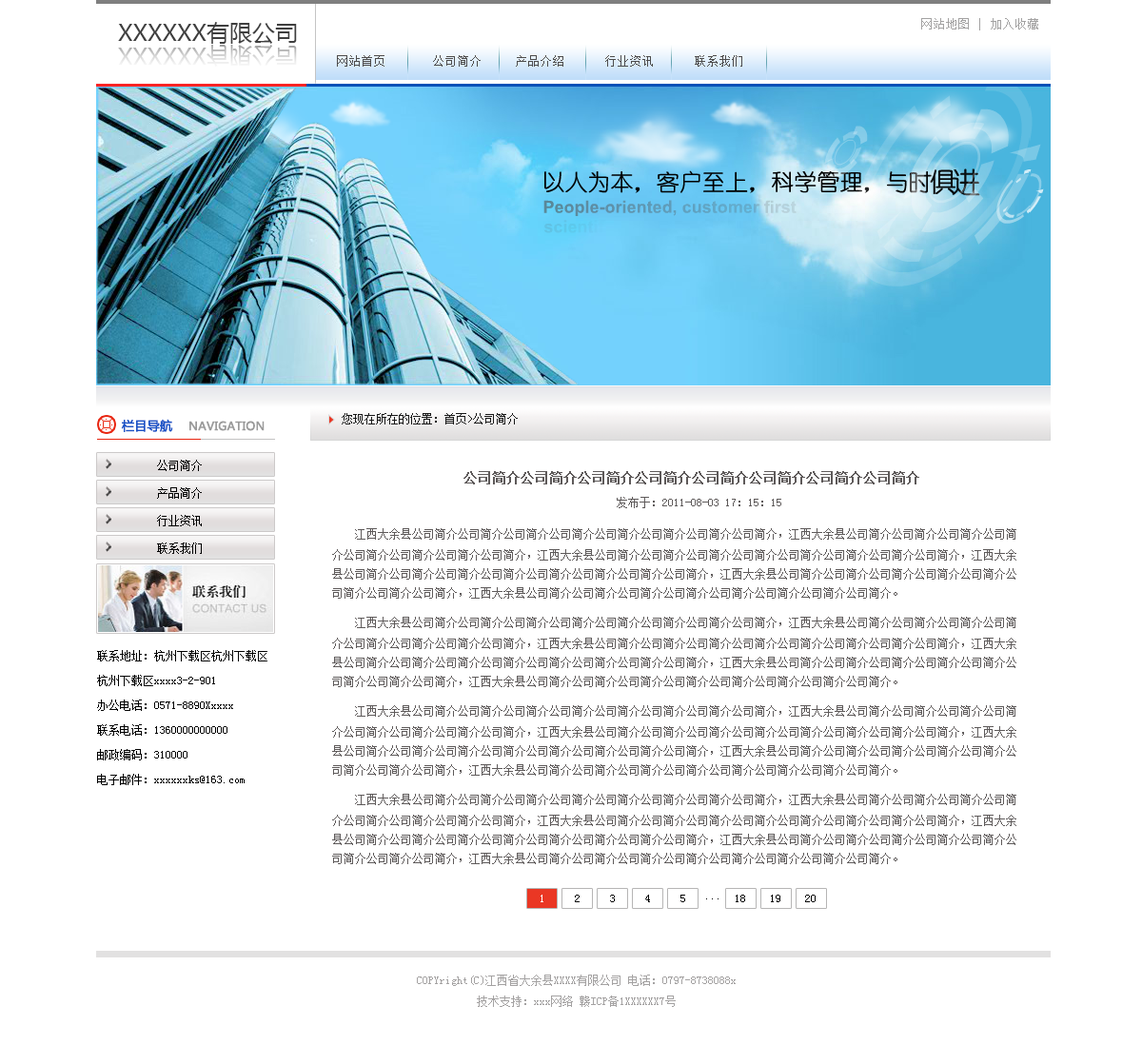
<style>
.page{position:relative;width:1142px;height:1045px;background:#ffffff}
.page>*{position:absolute;margin:0}
.t1{font:22.8px "MicrosoftYaHei";color:#3f3f3f}
.t2{font:12.4px "SimSun";color:#a3a2a2}
.t3{font:22.8px "MicrosoftYaHei"}
.t4{font:12.4px "SimSun";color:#4d4c4c}
.t5{font:11.4px "SimSun";color:#191919}
.t6{font:11.4px "MicrosoftYaHei";color:#9a9a9a;font-weight:bold}
.t7{font:12.4px "MicrosoftYaHei";color:#1952c6;font-weight:bold}
.t8{font:11.4px "SimSun";color:#000000}
.t9{font:13.3px "SimSun";color:#5e5a5a;font-weight:bold}
.t10{font:11.4px "SimSun";color:#5e5a5a}
.t11{font:11.4px/19px "SimSun";color:#5e5a5a}
.t12{font:11.4px/20.9px "SimSun";color:#5e5a5a}
.t13{font:11.4px/24.7px "SimSun";color:#000000}
.t14{font:11.4px "SimSun";color:#ffffff}
.t15{font:11.4px/20.9px "SimSun";color:#a4a2a2}
</style>
<div class="page">
<p class="t1" style="left:118px;top:22px;width:179px;height:22px">XXXXXX有限公司</p>
<p class="t2" style="left:921px;top:18px;width:117px;height:12px">网站地图 | 加入收藏</p>
<p class="t3" style="left:118px;top:45px;width:179px;height:22px">XXXXXX有限公司</p>
<p class="t4" style="left:337px;top:55px;width:405px;height:12px">网站首页       公司简介     产品介绍      行业资讯      联系我们</p>
<p class="t5" style="left:342px;top:413px;width:176px;height:11px">您现在所在的位置：首页&gt;公司简介</p>
<p class="t6" style="left:121px;top:419px;width:143px;height:13px"><span class="t7">栏目导航    </span>NAVIGATION</p>
<p class="t8" style="left:157px;top:459px;width:45px;height:12px">公司简介</p>
<p class="t9" style="left:463px;top:471px;width:456px;height:13px">公司简介公司简介公司简介公司简介公司简介公司简介公司简介公司简介</p>
<p class="t8" style="left:157px;top:487px;width:45px;height:11px">产品简介</p>
<p class="t10" style="left:616px;top:497px;width:165px;height:11px">发布于：2011-08-03 17：15：15</p>
<p class="t8" style="left:157px;top:515px;width:45px;height:11px">行业资讯</p>
<p class="t11" style="left:332px;top:528px;width:684px;height:70px"><span class="t12">　　</span>江西大余县公司简介公司简介公司简介公司简介公司简介公司简介公司简介公司简介，江西大余县公司简介公司简介公司简介公司简介公司简介公司简介公司简介公司简介，江西大余县公司简介公司简介公司简介公司简介公司简介公司简介公司简介公司简介，江西大余县公司简介公司简介公司简介公司简介公司简介公司简介公司简介公司简介，江西大余县公司简介公司简介公司简介公司简介公司简介公司简介公司简介公司简介，江西大余县公司简介公司简介公司简介公司简介公司简介公司简介公司简介公司简介。</p>
<p class="t8" style="left:157px;top:542px;width:45px;height:12px">联系我们</p>
<p class="t11" style="left:332px;top:616px;width:684px;height:71px"><span class="t12">　　</span>江西大余县公司简介公司简介公司简介公司简介公司简介公司简介公司简介公司简介，江西大余县公司简介公司简介公司简介公司简介公司简介公司简介公司简介公司简介，江西大余县公司简介公司简介公司简介公司简介公司简介公司简介公司简介公司简介，江西大余县公司简介公司简介公司简介公司简介公司简介公司简介公司简介公司简介，江西大余县公司简介公司简介公司简介公司简介公司简介公司简介公司简介公司简介，江西大余县公司简介公司简介公司简介公司简介公司简介公司简介公司简介公司简介。</p>
<p class="t13" style="left:97px;top:650px;width:170px;height:135px">联系地址：杭州下载区杭州下载区<br>杭州下载区xxxx3-2-901<br>办公电话：0571-8890Xxxxx<br>联系电话：1360000000000<br>邮政编码：310000<br>电子邮件：xxxxxxks@163.com</p>
<p class="t11" style="left:332px;top:705px;width:684px;height:70px"><span class="t12">　　</span>江西大余县公司简介公司简介公司简介公司简介公司简介公司简介公司简介公司简介，江西大余县公司简介公司简介公司简介公司简介公司简介公司简介公司简介公司简介，江西大余县公司简介公司简介公司简介公司简介公司简介公司简介公司简介公司简介，江西大余县公司简介公司简介公司简介公司简介公司简介公司简介公司简介公司简介，江西大余县公司简介公司简介公司简介公司简介公司简介公司简介公司简介公司简介，江西大余县公司简介公司简介公司简介公司简介公司简介公司简介公司简介公司简介。</p>
<p class="t11" style="left:332px;top:793px;width:684px;height:71px"><span class="t12">　　</span>江西大余县公司简介公司简介公司简介公司简介公司简介公司简介公司简介公司简介，江西大余县公司简介公司简介公司简介公司简介公司简介公司简介公司简介公司简介，江西大余县公司简介公司简介公司简介公司简介公司简介公司简介公司简介公司简介，江西大余县公司简介公司简介公司简介公司简介公司简介公司简介公司简介公司简介，江西大余县公司简介公司简介公司简介公司简介公司简介公司简介公司简介公司简介，江西大余县公司简介公司简介公司简介公司简介公司简介公司简介公司简介公司简介。</p>
<p class="t14" style="left:540px;top:894px;width:3px;height:8px">1</p>
<p class="t8" style="left:575px;top:894px;width:4px;height:8px">2</p>
<p class="t8" style="left:610px;top:894px;width:5px;height:8px">3</p>
<p class="t8" style="left:645px;top:894px;width:5px;height:8px">4</p>
<p class="t8" style="left:680px;top:894px;width:5px;height:8px">5</p>
<p class="t8" style="left:706px;top:898px;width:12px;height:1px">...</p>
<p class="t8" style="left:735px;top:894px;width:10px;height:8px">18</p>
<p class="t8" style="left:771px;top:894px;width:9px;height:8px">19</p>
<p class="t8" style="left:805px;top:894px;width:10px;height:8px">20</p>
<p class="t15" style="left:417px;top:974px;width:318px;height:32px;text-align:center">COPYright(C)江西省大余县XXXX有限公司 电话：0797-8738088x<br>技术支持：xxx网络 赣ICP备1XXXXXX7号</p>
</div>
